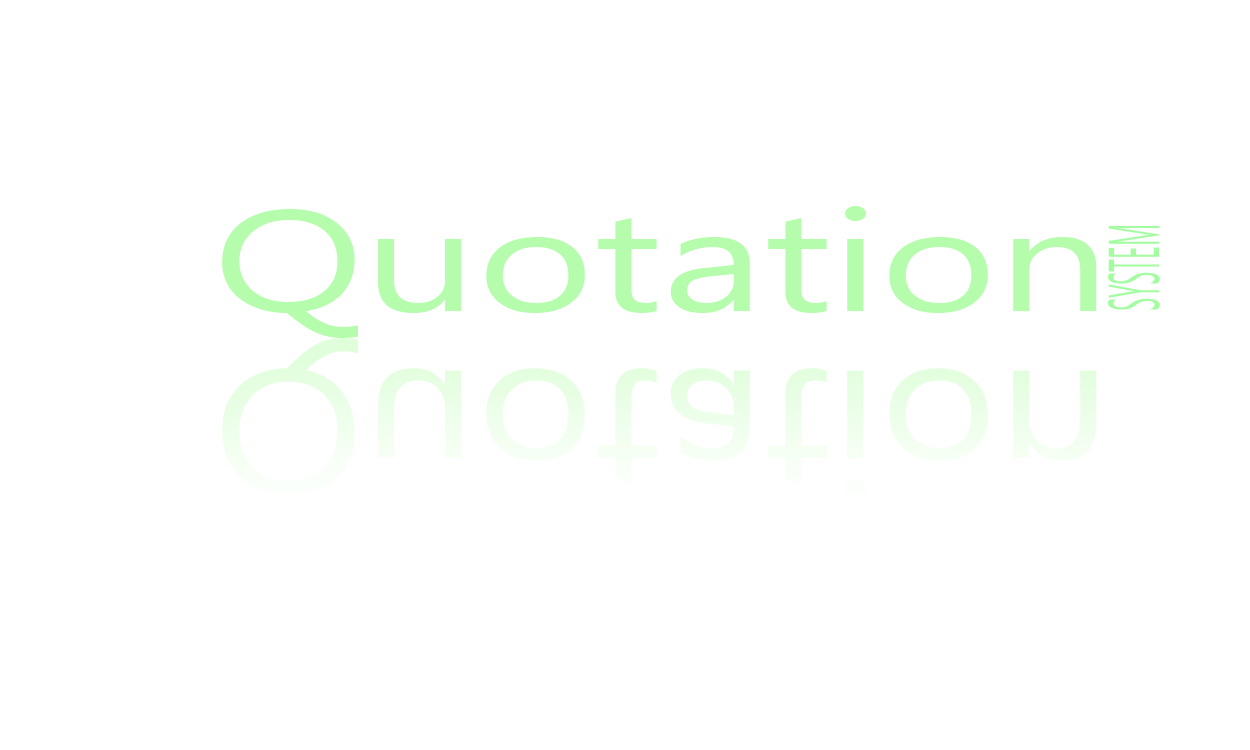
<style>
.page{position:relative;width:1250px;height:750px;background:#ffffff}
.page>*{position:absolute;margin:0}
.t1{font:142.9px "SegoeUI";color:#b5fdac;scale:1.4 1}
.t2{font:71.7px "SegoeUI";color:#a3fda0;scale:0.34 1}
</style>
<div class="page">
<p class="t1" style="left:222px;top:206px;width:875px;height:132px">Quotation</p>
<p class="t2" style="left:1107px;top:225px;width:53px;height:85px;rotate:-90deg">SYSTEM</p>
</div>
